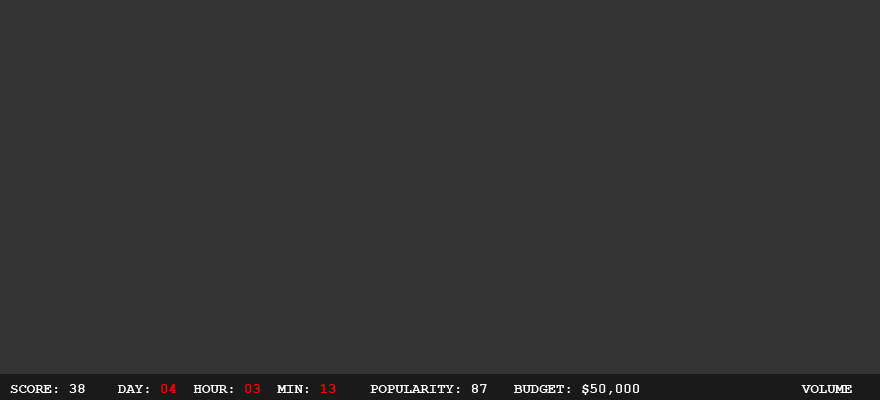
<style>
.page{position:relative;width:880px;height:400px;background:#333333}
.page>*{position:absolute;margin:0}
.t1{font:14px "CourierNewPS-BoldMT";color:#ffffff}
.t2{font:14px "CourierNewPS-BoldMT";color:#ff0000}
</style>
<div class="page">
<p class="t1" style="left:10px;top:384px;width:842px;height:11px">SCORE: 38 DAY: <span class="t2">04  </span>HOUR: <span class="t2">03  </span>MIN: <span class="t2">13 </span>POPULARITY: 87 BUDGET: $50,000     VOLUME</p>
</div>
